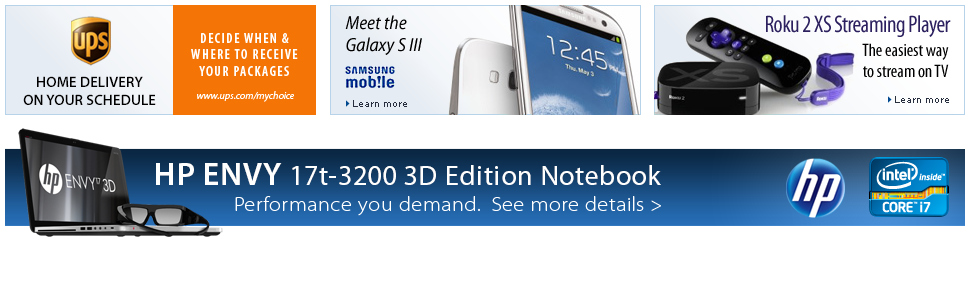
<style>
.page{position:relative;width:970px;height:300px;background:#ffffff}
.page>*{position:absolute;margin:0}
.t1{font:19px "MyriadPro-SemiCnIt";color:#000000}
.t2{font:24px "MyriadPro-Cond";letter-spacing:-0.025em;color:#2c205f}
.t3{font:14px "MyriadPro-SemiboldCond";letter-spacing:0.1em;color:#ffffff;text-transform:uppercase}
.t4{font:18px "MyriadPro-Cond";color:#000000}
.t5{font:15px "MyriadPro-Semibold";color:#000000;text-transform:uppercase}
.t6{font:10px "MyriadPro-It";color:#ffffff}
.t7{font:9px "Verdana";color:#272e3d}
.t8{font:28px "MyriadPro-Regular";letter-spacing:0.025em;color:#ffffff}
.t9{font:32px "MyriadPro-Semibold";letter-spacing:0.025em;color:#ffffff}
.t10{font:20px "MyriadPro-LightSemiExt";letter-spacing:0.025em;color:#ffffff}
</style>
<div class="page">
<p class="t1" style="left:345px;top:15px;width:77px;height:40px">Meet the<br>Galaxy S III</p>
<p class="t2" style="left:766px;top:15px;width:185px;height:22px">Roku 2 XS Streaming Player</p>
<p class="t3" style="left:191px;top:33px;width:107px;height:43px;text-align:center">Decide when &amp;<br>where to receive<br>your packages</p>
<p class="t4" style="left:862px;top:43px;width:87px;height:35px;text-align:right">The easiest way<br>to stream on TV</p>
<p class="t5" style="left:23px;top:76px;width:133px;height:29px;text-align:center">Home delivery<br>on your schedule</p>
<p class="t6" style="left:197px;top:91px;width:97px;height:11px">www.ups.com/mychoice</p>
<p class="t7" style="left:353px;top:100px;width:54px;height:7px">Learn more</p>
<p class="t7" style="left:895px;top:96px;width:54px;height:7px">Learn more</p>
<p class="t8" style="left:156px;top:163px;width:505px;height:22px"><span class="t9">HP ENVY </span>17t-3200 3D Edition Notebook</p>
<p class="t10" style="left:235px;top:196px;width:426px;height:20px">Performance you demand.  See more details &gt;</p>
</div>
